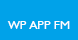
<style>
.page{position:relative;width:78px;height:40px;background:#00a2e9}
.page>*{position:absolute;margin:0}
.t1{font:12.1px "Humanist521BT-Roman";color:#fefefe}
</style>
<div class="page">
<p class="t1" style="left:7px;top:21px;width:63px;height:8px">WP APP FM</p>
</div>
